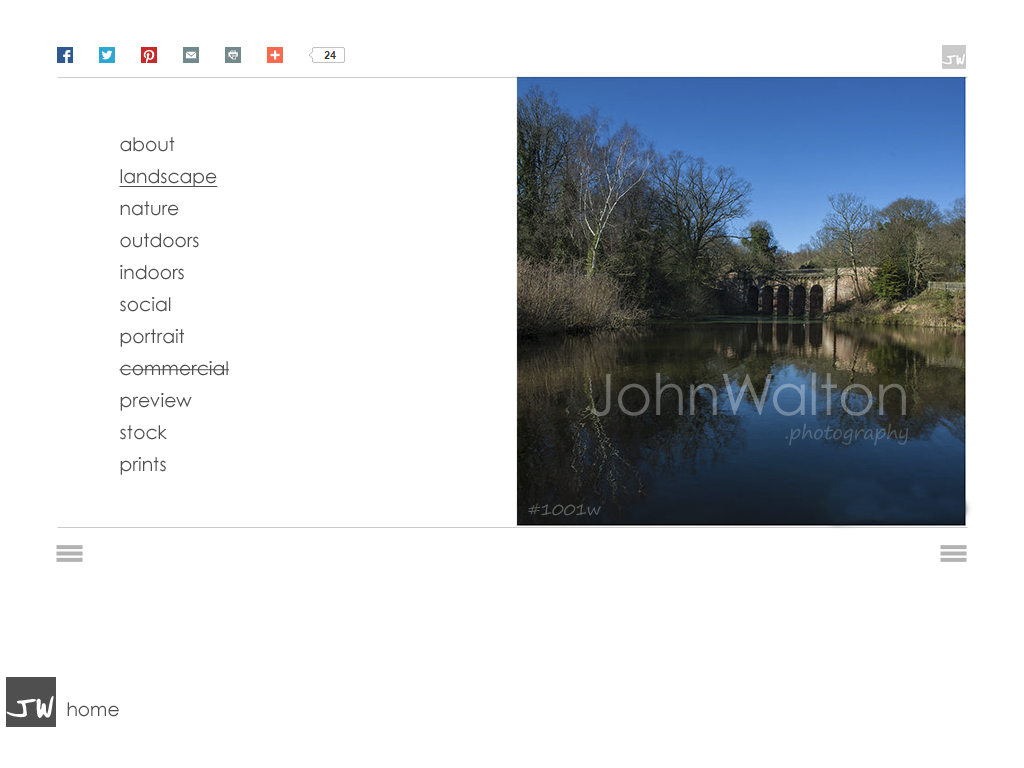
<style>
.page{position:relative;width:1024px;height:768px;background:#ffffff}
.page>*{position:absolute;margin:0}
.t1{font:18.7px/32px "CenturyGothic";color:#4f4f4f}
.t2{font:18.7px/32px "CenturyGothic";color:#4f4f4f;text-decoration:underline}
.t3{font:57.2px "CenturyGothic";letter-spacing:-0.01em}
.t4{font:57.2px "CenturyGothic";letter-spacing:-0.1em}
.t5{font:19.1px "SegoePrint";letter-spacing:-0.01em;color:#52657c}
.t6{font:16px "SegoePrint";letter-spacing:-0.01em;color:#5e5e5f}
.t7{font:18.7px "CenturyGothic";color:#4f4f4f}
</style>
<div class="page">
<p class="t1" style="left:119px;top:137px;width:110px;height:338px">about<br><span class="t2">landscape</span><br>nature<br>outdoors<br>indoors<br>social<br>portrait<br>commercial<br>preview<br>stock<br>prints<br>contact</p>
<p class="t3" style="left:590px;top:372px;width:316px;height:44px">John<span class="t4">W</span>alton</p>
<p class="t5" style="left:785px;top:423px;width:123px;height:23px">.photography</p>
<p class="t6" style="left:528px;top:503px;width:73px;height:13px">#1001w</p>
<p class="t7" style="left:67px;top:702px;width:52px;height:15px">home</p>
</div>
